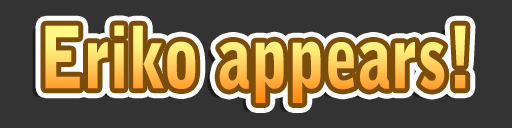
<style>
.page{position:relative;width:512px;height:128px;background:#333333}
.page>*{position:absolute;margin:0}
.t1{font:85px "BellGothic-Black";scale:0.78 1}
</style>
<div class="page">
<p class="t1" style="left:45px;top:25px;width:421px;height:78px">Eriko appears!</p>
</div>
